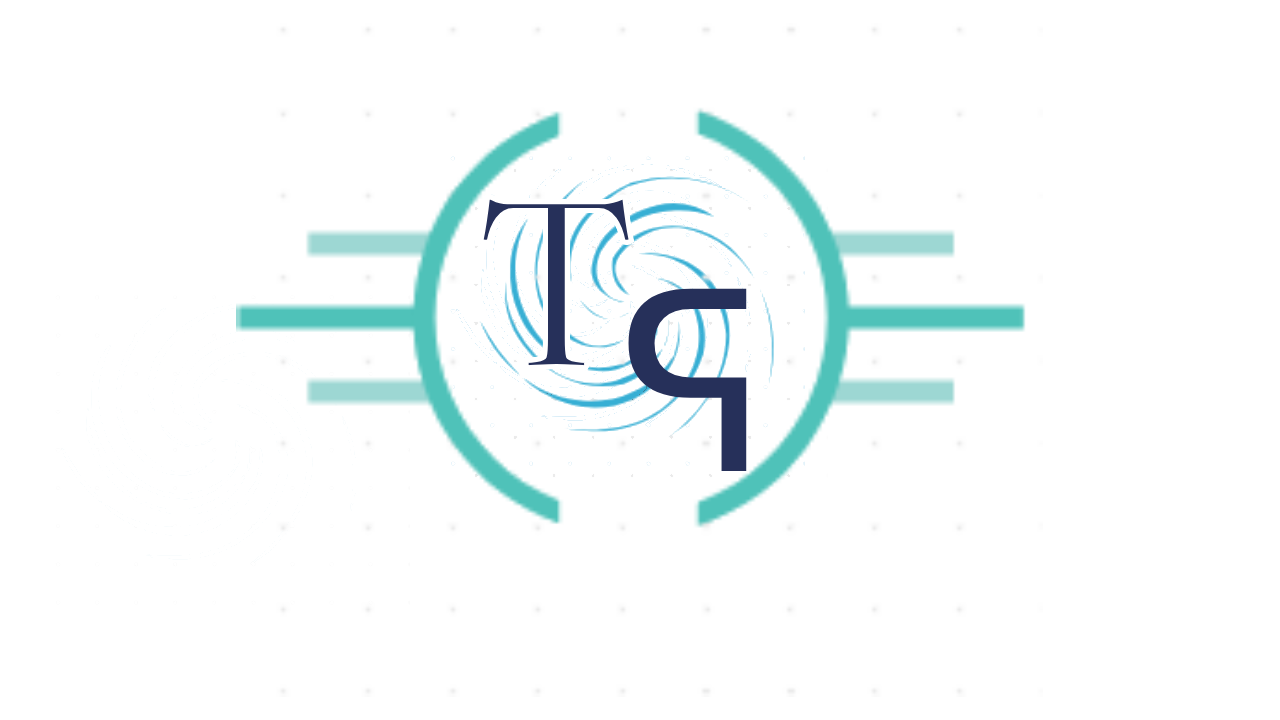
<style>
.page{position:relative;width:1280px;height:720px;background:#ffffff}
.page>*{position:absolute;margin:0}
.t1{font:250px "Crimson-Roman"}
.t2{font:250px "DejaVuSans";color:#26305a}
</style>
<div class="page">
<p class="t1" style="left:478px;top:193px;width:157px;height:178px">T</p>
<p class="t2" style="left:628px;top:288px;width:119px;height:183px">ᕋ</p>
</div>
